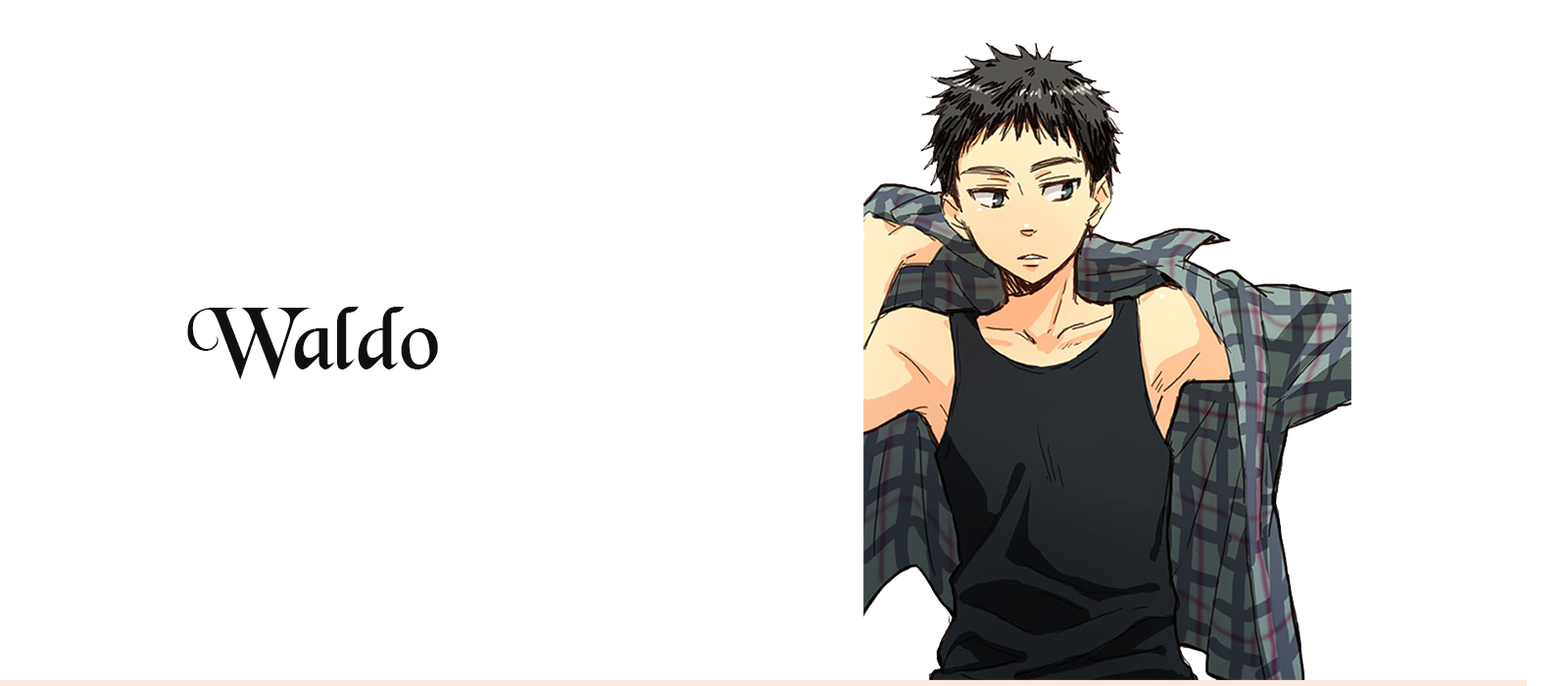
<style>
.page{position:relative;width:1568px;height:686px;background:#ffffff}
.page>*{position:absolute;margin:0}
.t1{font:93.1px "BlackChancery";color:#101010}
</style>
<div class="page">
<p class="t1" style="left:187px;top:307px;width:251px;height:73px">Waldo</p>
</div>
